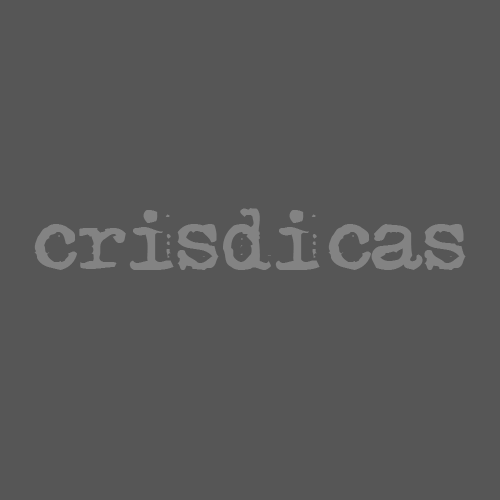
<style>
.page{position:relative;width:500px;height:500px;background:#565656}
.page>*{position:absolute;margin:0}
.t1{font:77.8px "Adler";color:#838383}
</style>
<div class="page">
<p class="t1" style="left:34px;top:208px;width:432px;height:62px">crisdicas</p>
</div>
